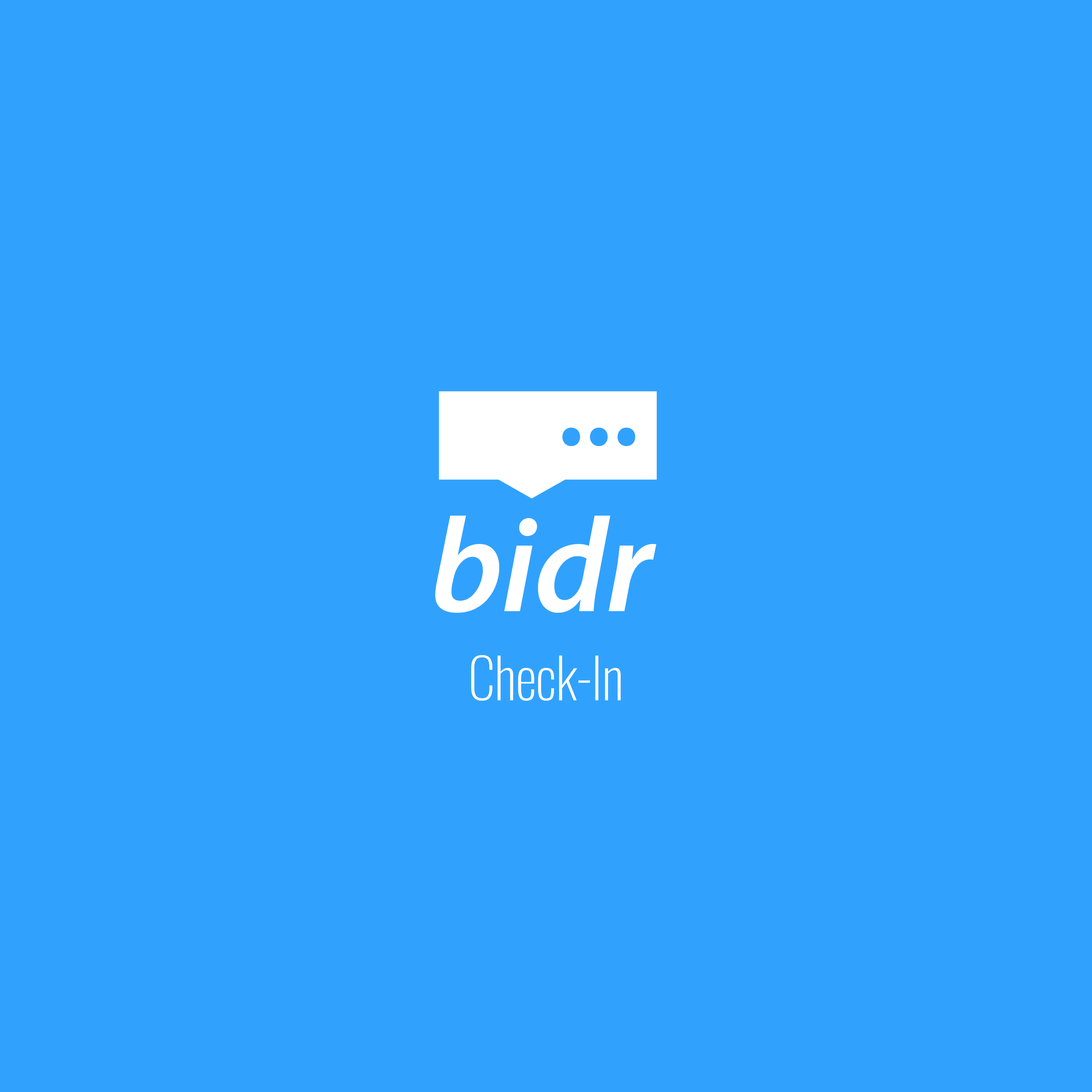
<style>
.page{position:relative;width:1092px;height:1092px;background:#30a2fd}
.page>*{position:absolute;margin:0}
.t1{font:116.7px "MyriadPro-Semibold";color:#30a2fd}
.t2{font:134.7px "MyriadPro-SemiboldIt";letter-spacing:-0.01em;color:#ffffff}
.t3{font:55px "Oswald-ExtraLight";letter-spacing:-0.01em;color:#ffffff}
</style>
<div class="page">
<p class="t1" style="left:562px;top:427px;width:74px;height:19px">...</p>
<p class="t2" style="left:435px;top:516px;width:221px;height:97px">bidr</p>
<p class="t3" style="left:471px;top:655px;width:150px;height:46px">Check-In</p>
</div>
